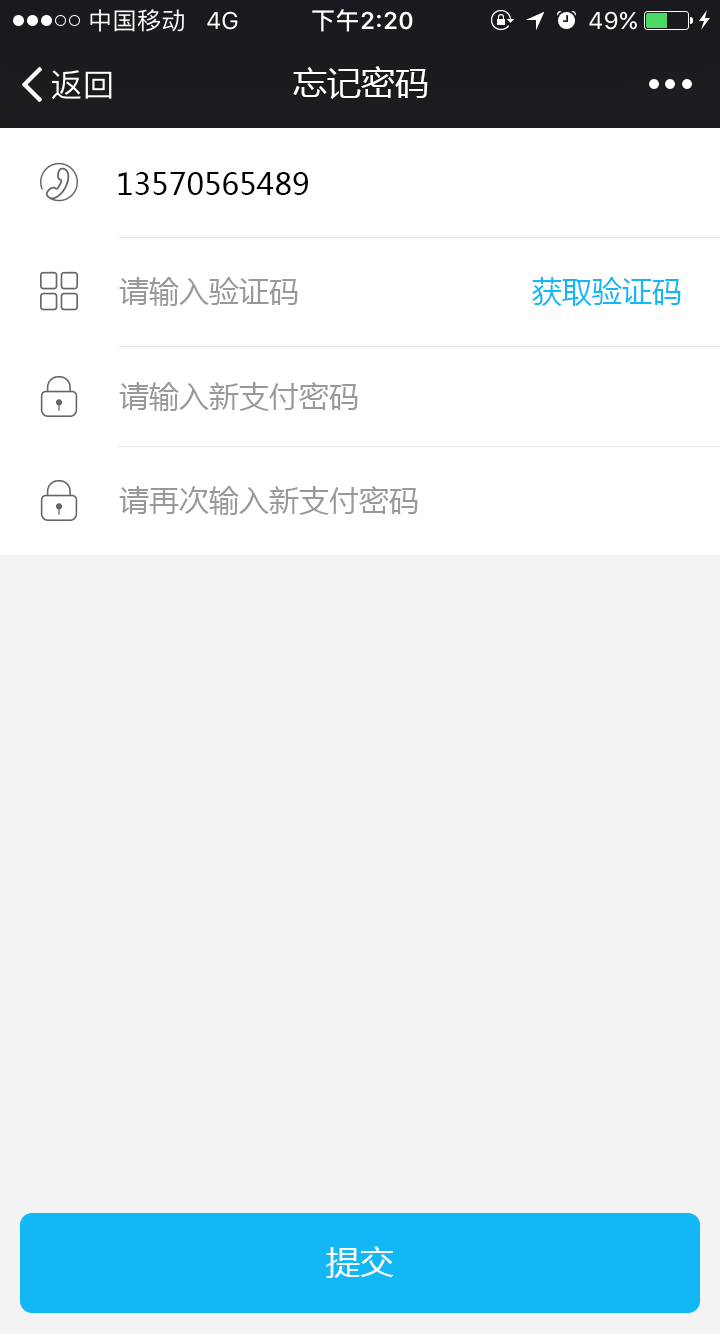
<style>
.page{position:relative;width:720px;height:1334px;background:#f3f3f3}
.page>*{position:absolute;margin:0}
.t1{font:34px "MicrosoftYaHei";color:#ffffff}
.t2{font:30px "MicrosoftYaHei";color:#000000}
.t3{font:30px "MicrosoftYaHei";color:#999999}
.t4{font:30px "MicrosoftYaHei";color:#12b7f5}
</style>
<div class="page">
<p class="t1" style="left:293px;top:66px;width:135px;height:33px">忘记密码</p>
<p class="t2" style="left:118px;top:172px;width:190px;height:23px">13570565489</p>
<p class="t3" style="left:119px;top:277px;width:179px;height:29px">请输入验证码</p>
<p class="t4" style="left:532px;top:277px;width:149px;height:29px">获取验证码</p>
<p class="t3" style="left:119px;top:382px;width:239px;height:29px">请输入新支付密码</p>
<p class="t3" style="left:119px;top:486px;width:299px;height:29px">请再次输入新支付密码</p>
<p class="t1" style="left:326px;top:1246px;width:68px;height:32px">提交</p>
</div>
